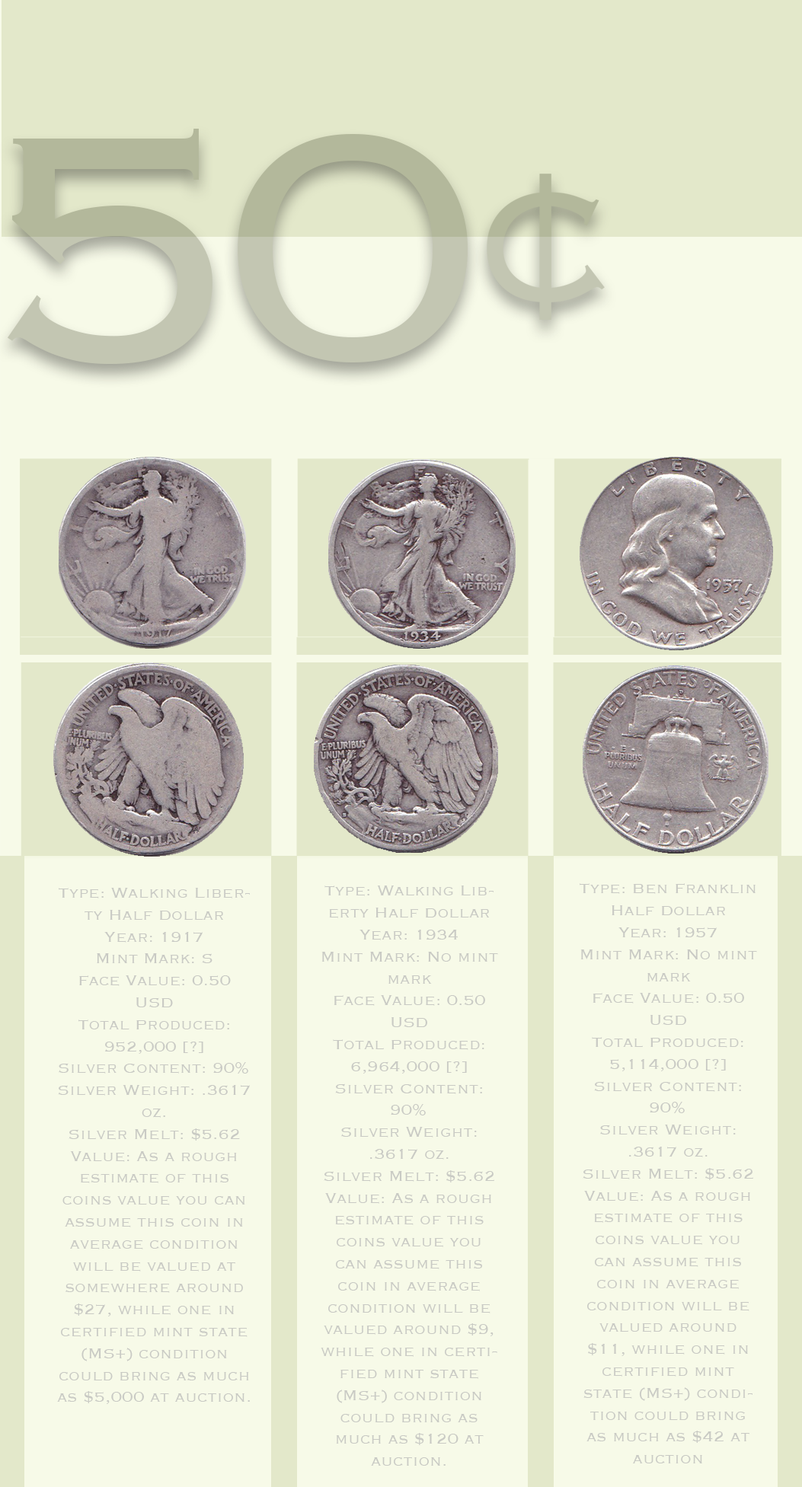
<style>
.page{position:relative;width:802px;height:1487px;background:#f7fae8}
.page>*{position:absolute;margin:0}
.t1{font:425.5px "Copperplate-Light"}
.t2{font:18.3px "Copperplate-Light";color:#c9cac4}
</style>
<div class="page">
<p class="t1" style="left:7px;top:129px;width:205px;height:235px">5</p>
<p class="t1" style="left:238px;top:134px;width:230px;height:228px">0</p>
<p class="t2" style="left:57px;top:888px;width:193px;height:516px;text-align:center">Type: Walking Liberty Half Dollar<br>Year: 1917<br>Mint Mark: S<br>Face Value: 0.50 USD<br>Total Produced: 952,000 [?]<br>Silver Content: 90% <br>Silver Weight: .3617 oz.<br>Silver Melt: $5.62<br>Value: As a rough estimate of this coins value you can assume this coin in average condition will be valued at somewhere around $27, while one in certified mint state (MS+) condition could bring as much as $5,000 at auction.</p>
<p class="t2" style="left:321px;top:886px;width:177px;height:580px;text-align:center">Type: Walking Liberty Half Dollar<br>Year: 1934<br>Mint Mark: No mint mark<br>Face Value: 0.50 USD<br>Total Produced: 6,964,000 [?]<br>Silver Content: 90% <br>Silver Weight: .3617 oz.<br>Silver Melt: $5.62<br>Value: As a rough estimate of this coins value you can assume this coin in average condition will be valued around $9, while one in certified mint state (MS+) condition could bring as much as $120 at auction.</p>
<p class="t2" style="left:579px;top:883px;width:178px;height:581px;text-align:center">Type: Ben Franklin Half Dollar<br>Year: 1957<br>Mint Mark: No mint mark<br>Face Value: 0.50 USD<br>Total Produced: 5,114,000 [?]<br>Silver Content: 90% <br>Silver Weight: .3617 oz.<br>Silver Melt: $5.62<br>Value: As a rough estimate of this coins value you can assume this coin in average condition will be valued around $11, while one in certified mint state (MS+) condition could bring as much as $42 at auction</p>
</div>
